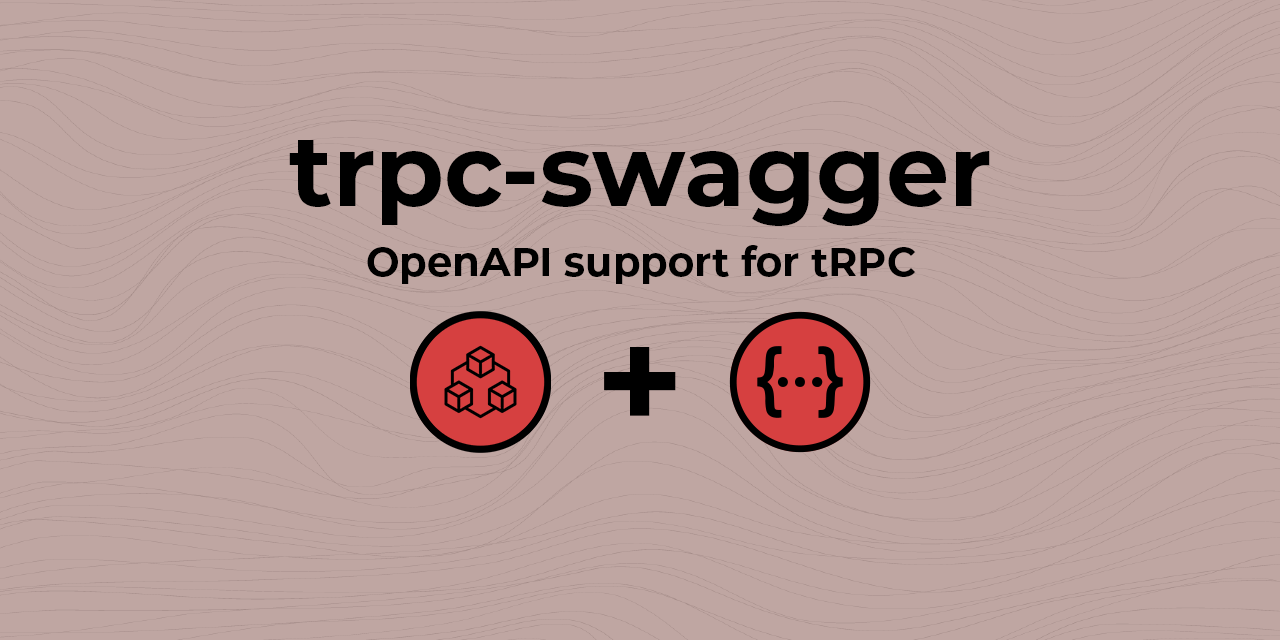
<style>
.page{position:relative;width:1280px;height:640px;background:#bfa6a2}
.page>*{position:absolute;margin:0}
.t1{font:100px "Montserrat-Bold";color:#000000}
.t2{font:40px "Montserrat-Bold";color:#000000}
.t3{font:150px "Montserrat-Bold";color:#000000}
</style>
<div class="page">
<p class="t1" style="left:289px;top:140px;width:701px;height:86px">trpc-swagger</p>
<p class="t2" style="left:367px;top:245px;width:549px;height:39px">OpenAPI support for tRPC</p>
<p class="t3" style="left:604px;top:347px;width:72px;height:69px">+</p>
</div>
